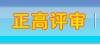
<style>
.page{position:relative;width:100px;height:45px}
.page>*{position:absolute;margin:0}
.t1{font:18px "SimHei";letter-spacing:0.04em;color:#ebe315;font-weight:bold}
</style>
<div class="page">
<p class="t1" style="left:12px;top:12px;width:73px;height:18px">正高评审</p>
</div>
